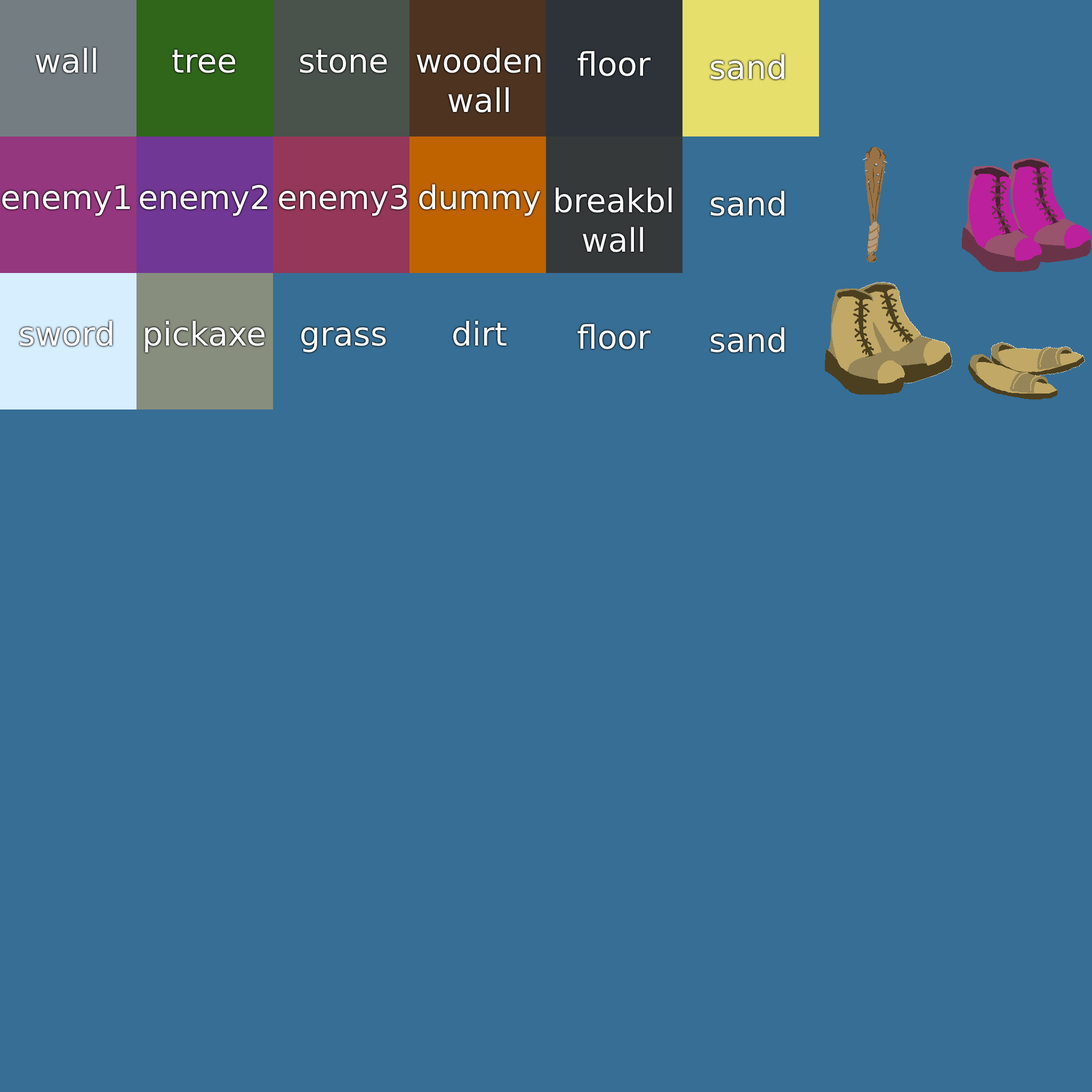
<style>
.page{position:relative;width:1092px;height:1092px;background:#376e95}
.page>*{position:absolute;margin:0}
.t1{font:32.5px "DejaVuSans";color:#ffffff}
</style>
<div class="page">
<p class="t1" style="left:35px;top:47px;width:61px;height:26px">wall</p>
<p class="t1" style="left:172px;top:50px;width:63px;height:23px">tree</p>
<p class="t1" style="left:300px;top:50px;width:87px;height:23px">stone</p>
<p class="t1" style="left:416px;top:47px;width:125px;height:66px;text-align:center">wooden<br>wall</p>
<p class="t1" style="left:577px;top:51px;width:73px;height:25px">floor</p>
<p class="t1" style="left:711px;top:54px;width:73px;height:25px">sand</p>
<p class="t1" style="left:2px;top:185px;width:128px;height:31px">enemy1</p>
<p class="t1" style="left:140px;top:184px;width:127px;height:32px">enemy2</p>
<p class="t1" style="left:279px;top:184px;width:128px;height:32px">enemy3</p>
<p class="t1" style="left:419px;top:184px;width:122px;height:32px">dummy</p>
<p class="t1" style="left:556px;top:187px;width:116px;height:65px;text-align:center">breakbl<br>wall</p>
<p class="t1" style="left:711px;top:190px;width:73px;height:26px">sand</p>
<p class="t1" style="left:20px;top:320px;width:93px;height:26px">sword</p>
<p class="t1" style="left:145px;top:320px;width:119px;height:32px">pickaxe</p>
<p class="t1" style="left:301px;top:327px;width:85px;height:25px">grass</p>
<p class="t1" style="left:453px;top:320px;width:54px;height:26px">dirt</p>
<p class="t1" style="left:577px;top:324px;width:73px;height:25px">floor</p>
<p class="t1" style="left:711px;top:327px;width:73px;height:25px">sand</p>
</div>
